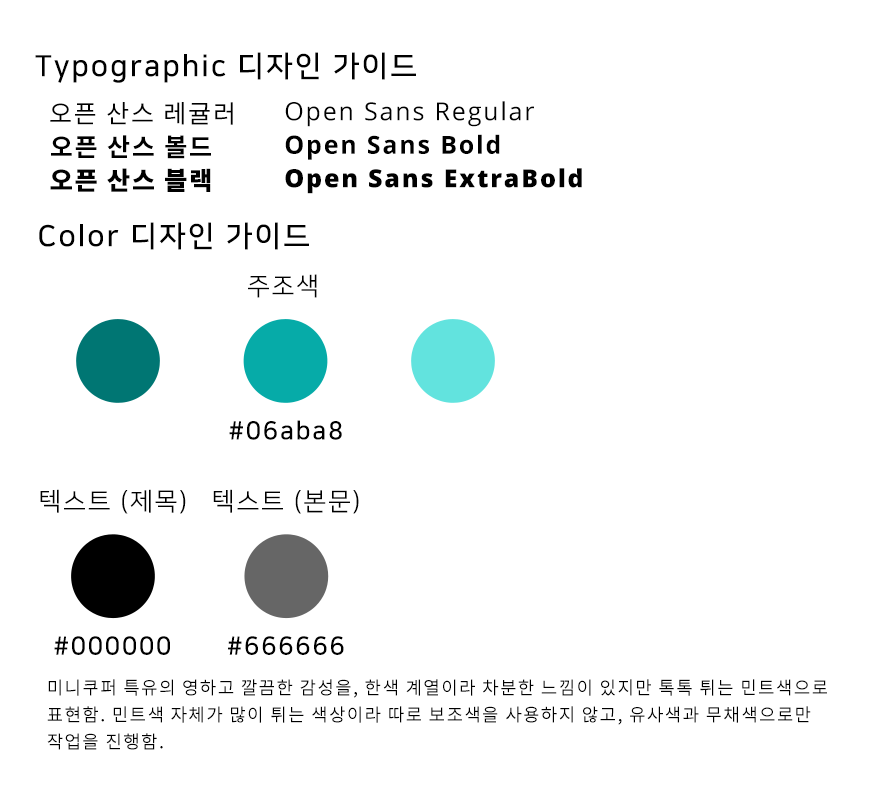
<style>
.page{position:relative;width:878px;height:790px;background:#ffffff}
.page>*{position:absolute;margin:0}
.t1{font:29.3px "NanumSquareB";letter-spacing:0.07em;color:#000000}
.t2{font:25.1px "NotoSansKR-Regular";letter-spacing:0.07em;color:#000000}
.t3{font:25.1px "OpenSans-Regular";letter-spacing:0.07em;color:#000000}
.t4{font:25.1px "NotoSansKR-Bold";letter-spacing:0.07em;color:#000000}
.t5{font:25.1px "OpenSans-Bold";letter-spacing:0.07em;color:#000000}
.t6{font:25.1px "NotoSansKR-Black";letter-spacing:0.07em;color:#000000}
.t7{font:25.1px "OpenSans-ExtraBold";letter-spacing:0.07em;color:#000000}
.t8{font:25.1px "NanumSquareR";letter-spacing:0.07em;color:#000000}
.t9{font:25.1px "NanumSquareB";letter-spacing:0.07em;color:#000000}
.t10{font:18px "NotoSansKR-Regular";letter-spacing:0.07em;color:#000000}
</style>
<div class="page">
<p class="t1" style="left:35px;top:52px;width:381px;height:31px">Typographic 디자인 가이드</p>
<p class="t2" style="left:50px;top:102px;width:183px;height:23px">오픈 산스 레귤러</p>
<p class="t3" style="left:285px;top:101px;width:249px;height:26px">Open Sans Regular</p>
<p class="t4" style="left:51px;top:135px;width:160px;height:24px">오픈 산스 볼드</p>
<p class="t5" style="left:285px;top:134px;width:215px;height:26px">Open Sans Bold</p>
<p class="t6" style="left:50px;top:168px;width:161px;height:24px">오픈 산스 블랙</p>
<p class="t7" style="left:285px;top:168px;width:297px;height:26px">Open Sans ExtraBold</p>
<p class="t1" style="left:39px;top:222px;width:270px;height:28px">Color 디자인 가이드</p>
<p class="t8" style="left:248px;top:274px;width:69px;height:24px">주조색</p>
<p class="t9" style="left:229px;top:420px;width:113px;height:20px">#06aba8</p>
<p class="t8" style="left:40px;top:489px;width:146px;height:25px">텍스트 (제목)</p>
<p class="t8" style="left:213px;top:489px;width:146px;height:25px">텍스트 (본문)</p>
<p class="t9" style="left:54px;top:636px;width:116px;height:19px">#000000</p>
<p class="t9" style="left:228px;top:636px;width:116px;height:19px">#666666</p>
<p class="t10" style="left:47px;top:679px;width:780px;height:71px">미니쿠퍼 특유의 영하고 깔끔한 감성을, 한색 계열이라 차분한 느낌이 있지만 톡톡 튀는 민트색으로 표현함. 민트색 자체가 많이 튀는 색상이라 따로 보조색을 사용하지 않고, 유사색과 무채색으로만 작업을 진행함.</p>
</div>
